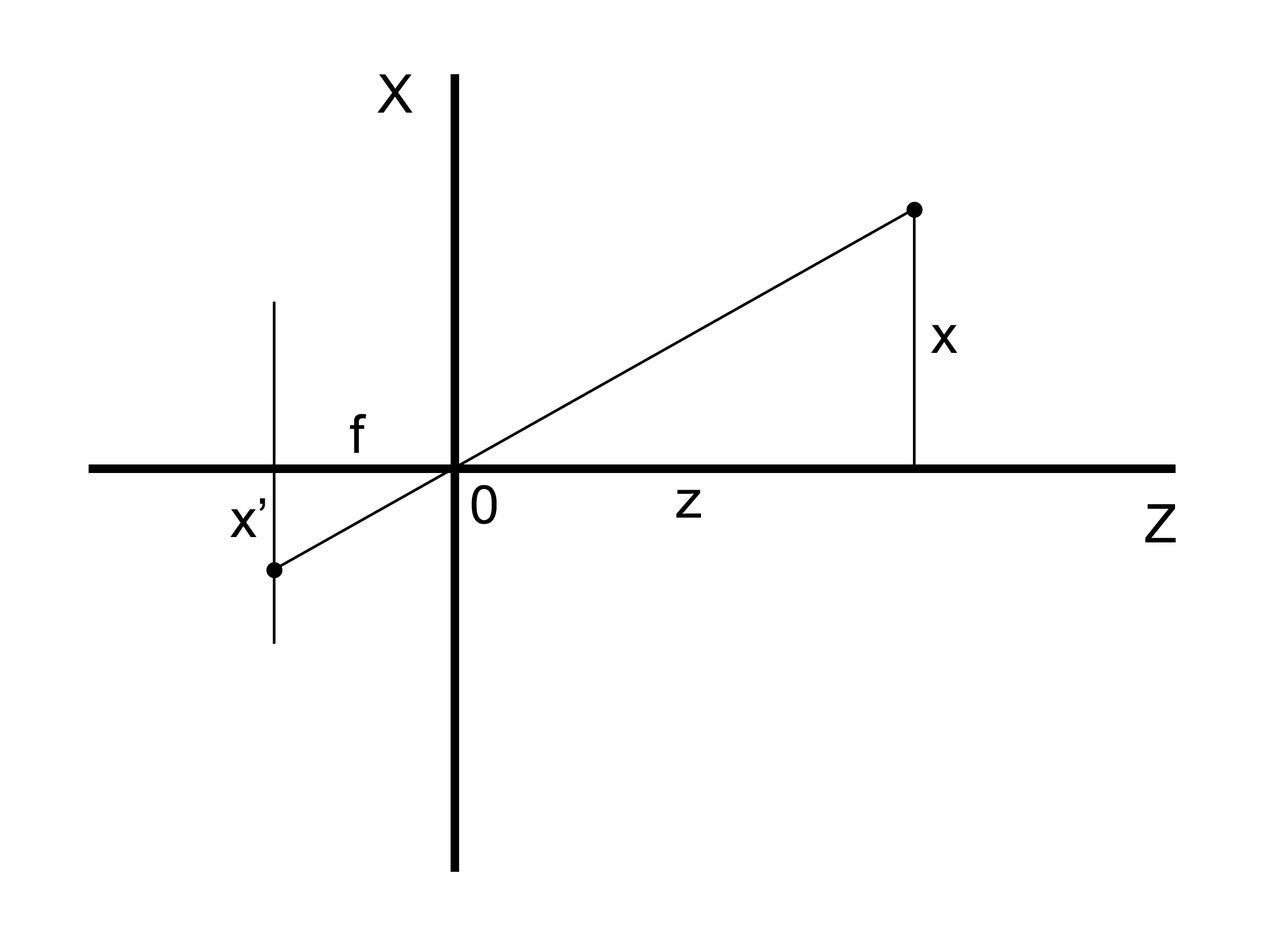
<style>
.page{position:relative;width:1261px;height:946px;background:#ffffff}
.page>*{position:absolute;margin:0}
.t1{font:53.4px "ArialMT";color:#000000}
</style>
<div class="page">
<p class="t1" style="left:377px;top:74px;width:36px;height:39px">X</p>
<p class="t1" style="left:931px;top:325px;width:26px;height:28px">x</p>
<p class="t1" style="left:350px;top:414px;width:16px;height:39px">f</p>
<p class="t1" style="left:471px;top:485px;width:26px;height:39px">0</p>
<p class="t1" style="left:230px;top:498px;width:35px;height:39px">x’</p>
<p class="t1" style="left:676px;top:489px;width:25px;height:29px">z</p>
<p class="t1" style="left:1145px;top:504px;width:31px;height:38px">Z</p>
</div>
